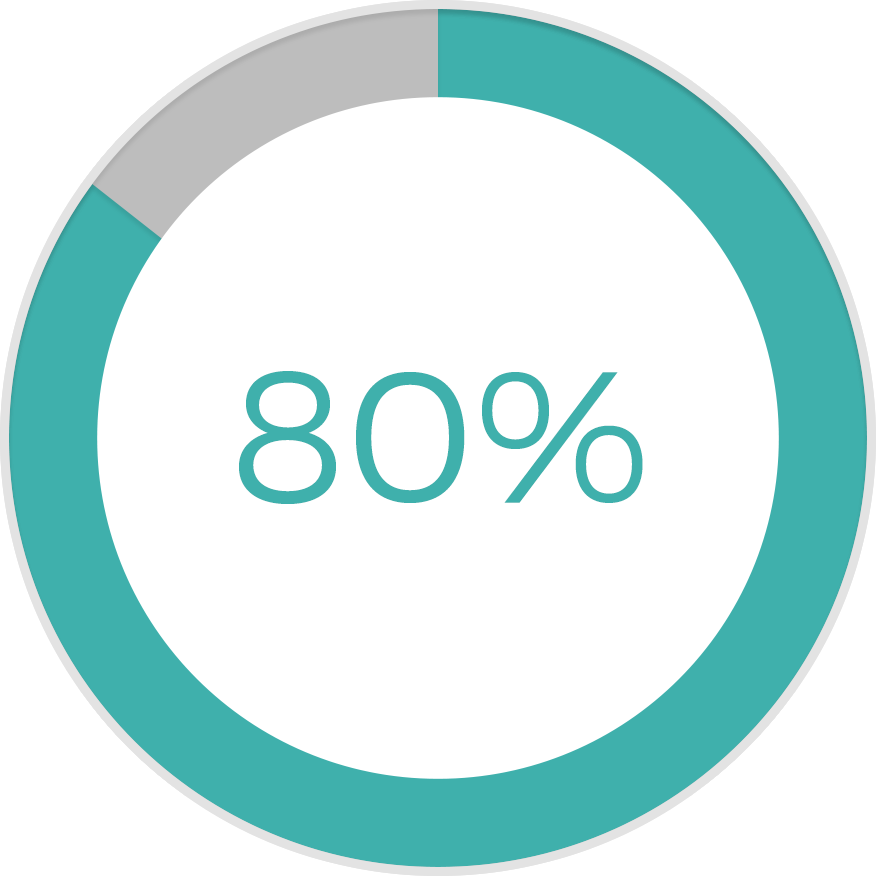
<style>
.page{position:relative;width:876px;height:876px;background:#ffffff}
.page>*{position:absolute;margin:0}
.t1{font:187.4px "Montserrat-Light";color:#3fb0ac}
</style>
<div class="page">
<p class="t1" style="left:239px;top:371px;width:404px;height:133px">80%</p>
<p class="t1" style="left:240px;top:371px;width:402px;height:133px">90%</p>
</div>
